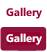
<style>
.page{position:relative;width:47px;height:52px;background:#ffffff}
.page>*{position:absolute;margin:0}
.t1{font:11px "MicrosoftPhagsPa-Bold";color:#990033}
.t2{font:11px "MicrosoftPhagsPa-Bold";color:#ffffff}
</style>
<div class="page">
<p class="t1" style="left:6px;top:7px;width:36px;height:12px">Gallery</p>
<p class="t2" style="left:6px;top:33px;width:36px;height:12px">Gallery</p>
</div>
